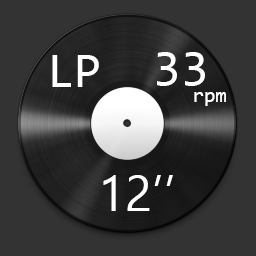
<style>
.page{position:relative;width:256px;height:256px;background:#333333}
.page>*{position:absolute;margin:0}
.t1{font:50px "Consolas";color:#ffffff}
.t2{font:20.8px "Consolas";color:#ffffff}
.t3{font:50px "Ebrima";color:#ffffff}
</style>
<div class="page">
<p class="t1" style="left:157px;top:52px;width:48px;height:34px">33</p>
<p class="t1" style="left:52px;top:55px;width:47px;height:32px">LP</p>
<p class="t2" style="left:194px;top:92px;width:32px;height:14px">rpm</p>
<p class="t3" style="left:103px;top:175px;width:70px;height:36px">12’’</p>
</div>
